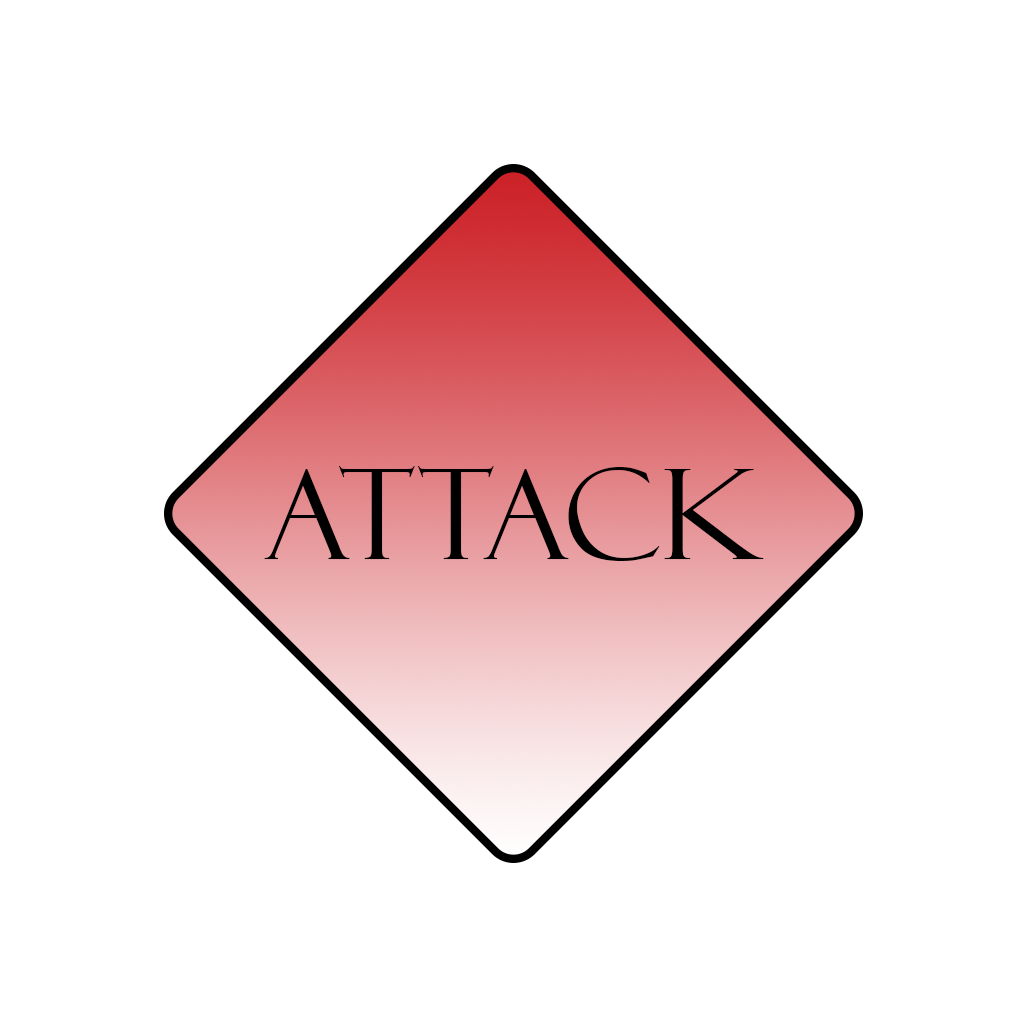
<style>
.page{position:relative;width:1028px;height:1028px;background:#ffffff}
.page>*{position:absolute;margin:0}
.t1{font:125px "FelixTitlingMT";color:#000000}
</style>
<div class="page">
<p class="t1" style="left:264px;top:466px;width:500px;height:95px">ATTACK</p>
</div>
